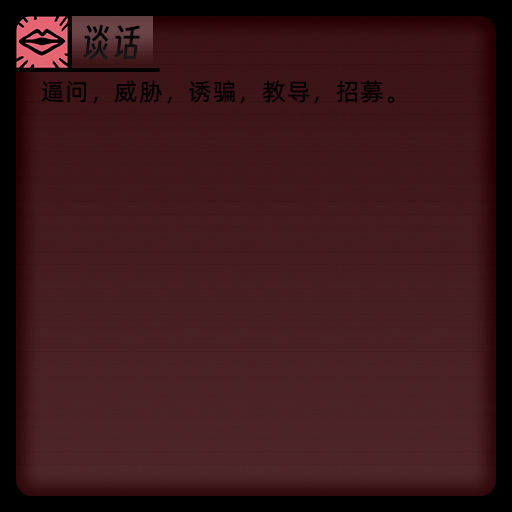
<style>
.page{position:relative;width:512px;height:512px}
.page>*{position:absolute;margin:0}
.t1{font:36px "SmileySans-Oblique";letter-spacing:0.04em;color:#000000}
.t2{font:24px "AlibabaPuHuiTiR";letter-spacing:0.04em;color:#000000}
</style>
<div class="page">
<p class="t1" style="left:83px;top:25px;width:57px;height:35px">谈话</p>
<p class="t2" style="left:41px;top:80px;width:354px;height:24px">逼问，威胁，诱骗，教导，招募。</p>
</div>
